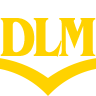
<style>
.page{position:relative;width:96px;height:96px;background:#ffffff}
.page>*{position:absolute;margin:0}
.t1{font:79.4px "DSNNamKang";letter-spacing:-0.045em;color:#ffd200;scale:0.8 1}
</style>
<div class="page">
<p class="t1" style="left:0px;top:18px;width:96px;height:39px">DLM</p>
</div>
